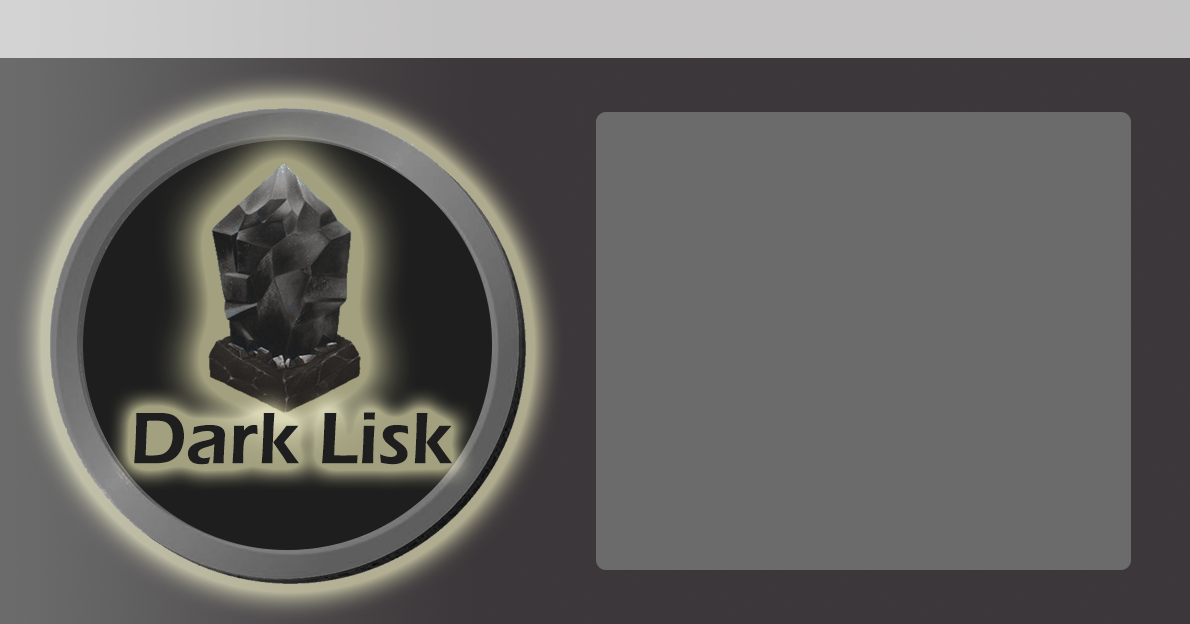
<style>
.page{position:relative;width:1190px;height:624px;background:#6b6b6b}
.page>*{position:absolute;margin:0}
.t1{font:75.1px "ErasITC-Demi";color:#1e1e1e}
</style>
<div class="page">
<p class="t1" style="left:134px;top:412px;width:318px;height:53px">Dark Lisk</p>
</div>
